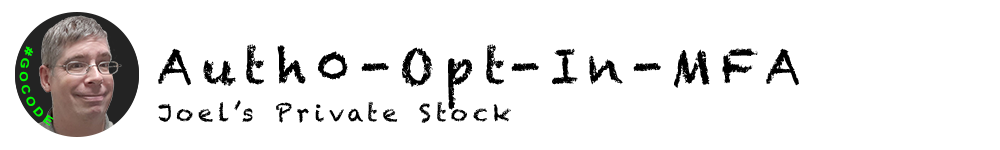
<style>
.page{position:relative;width:1000px;height:150px;background:#ffffff}
.page>*{position:absolute;margin:0}
.t1{font:11.2px "Arial-BoldMT";letter-spacing:0.2em;color:#00ff00}
.t2{font:48px "Chalkduster";letter-spacing:0.2em;color:#000000}
.t3{font:24px "Chalkduster";letter-spacing:0.2em;color:#000000}
</style>
<div class="page">
<p class="t1" style="left:19px;top:46px;width:35px;height:80px;rotate:72deg">#GOCODE</p>
<p class="t2" style="left:158px;top:44px;width:641px;height:66px">Auth0-Opt-In-MFA</p>
<p class="t3" style="left:158px;top:100px;width:353px;height:23px">Joel’s Private Stock</p>
</div>
